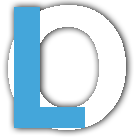
<style>
.page{position:relative;width:134px;height:137px;background:#ffffff}
.page>*{position:absolute;margin:0}
.t1{font:160px "MicrosoftYaHei-Bold";color:#44a6da}
</style>
<div class="page">
<p class="t1" style="left:14px;top:7px;width:71px;height:121px">L</p>
</div>
